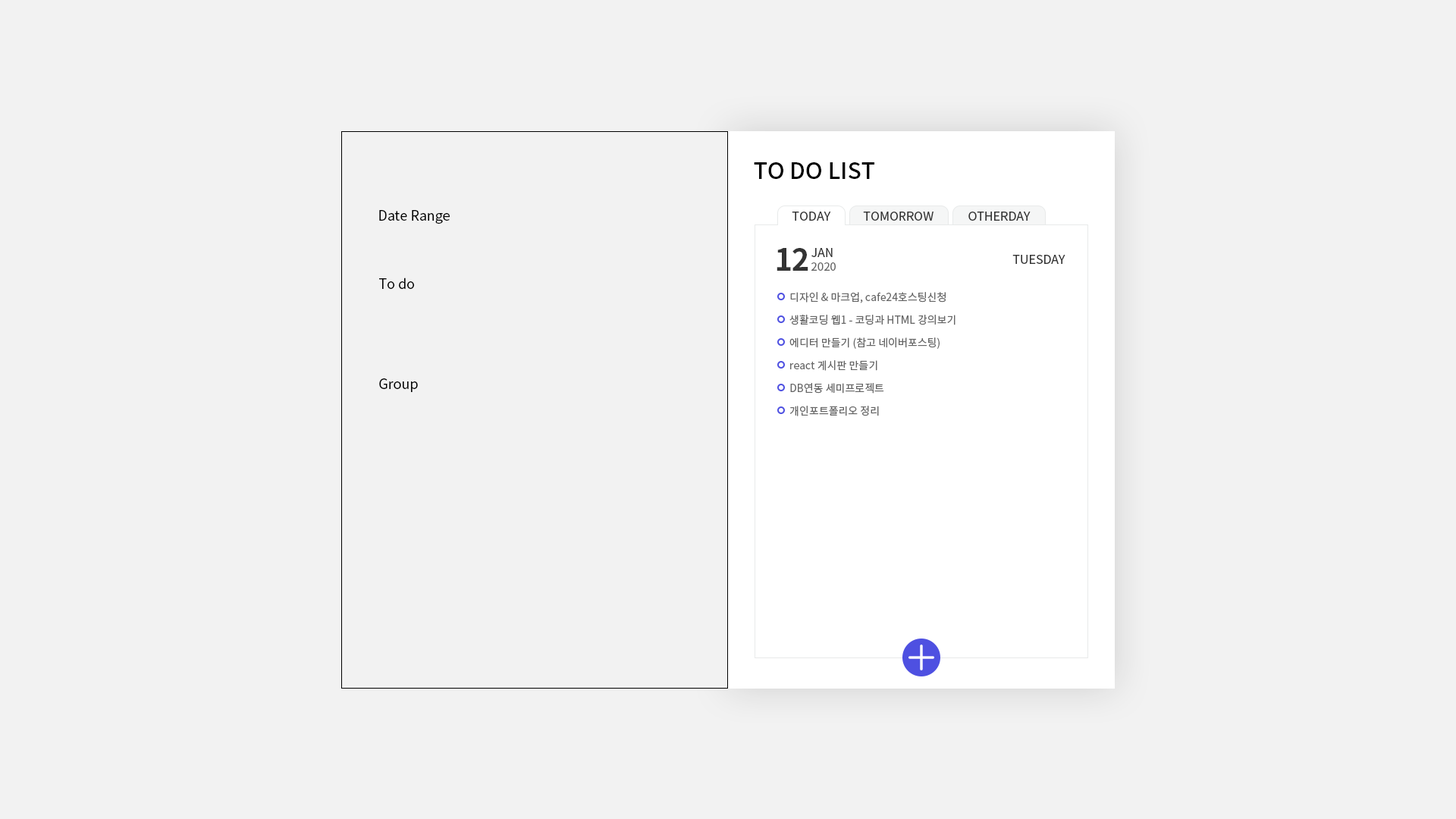
<style>
.page{position:relative;width:1456px;height:819px;background:#f2f2f2}
.page>*{position:absolute;margin:0}
.t1{font:22.7px "NotoSansCJKkr-Medium";color:#000000}
.t2{font:13.6px "NotoSansCJKkr-DemiLight";color:#000000}
.t3{font:12.1px "NotoSansCJKkr-Regular";color:#333333}
.t4{font:30.3px "NotoSansCJKkr-Bold";color:#333333}
.t5{font:11.4px "NotoSansCJKkr-Regular";color:#666666}
.t6{font:10.6px "NotoSansCJKkr-Regular";color:#666666}
</style>
<div class="page">
<p class="t1" style="left:754px;top:162px;width:120px;height:17px">TO DO LIST</p>
<p class="t2" style="left:379px;top:210px;width:71px;height:14px">Date Range</p>
<p class="t3" style="left:792px;top:212px;width:39px;height:9px">TODAY</p>
<p class="t3" style="left:863px;top:212px;width:70px;height:9px">TOMORROW</p>
<p class="t3" style="left:968px;top:212px;width:63px;height:9px">OTHERDAY</p>
<p class="t4" style="left:777px;top:248px;width:31px;height:23px">12</p>
<p class="t3" style="left:811px;top:248px;width:22px;height:9px">JAN</p>
<p class="t3" style="left:1012px;top:255px;width:53px;height:9px">TUESDAY</p>
<p class="t5" style="left:811px;top:262px;width:25px;height:9px">2020</p>
<p class="t2" style="left:379px;top:278px;width:35px;height:11px">To do</p>
<p class="t6" style="left:790px;top:292px;width:156px;height:11px">디자인 &amp; 마크업, cafe24호스팅신청</p>
<p class="t6" style="left:789px;top:314px;width:166px;height:11px">생활코딩 웹1 - 코딩과 HTML 강의보기</p>
<p class="t6" style="left:789px;top:337px;width:151px;height:12px">에디터 만들기 (참고 네이버포스팅)</p>
<p class="t6" style="left:790px;top:360px;width:87px;height:11px">react 게시판 만들기</p>
<p class="t2" style="left:379px;top:378px;width:39px;height:14px">Group</p>
<p class="t6" style="left:790px;top:383px;width:94px;height:11px">DB연동 세미프로젝트</p>
<p class="t6" style="left:789px;top:406px;width:90px;height:10px">개인포트폴리오 정리</p>
</div>
